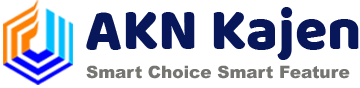
<style>
.page{position:relative;width:360px;height:88px;background:#ffffff}
.page>*{position:absolute;margin:0}
.t1{font:58.8px "Baloo-Regular";color:#08165a}
.t2{font:17px "Arial-Black";color:#757571}
</style>
<div class="page">
<p class="t1" style="left:86px;top:7px;width:273px;height:53px">AKN Kajen</p>
<p class="t2" style="left:86px;top:65px;width:264px;height:14px">Smart Choice Smart Feature</p>
</div>
